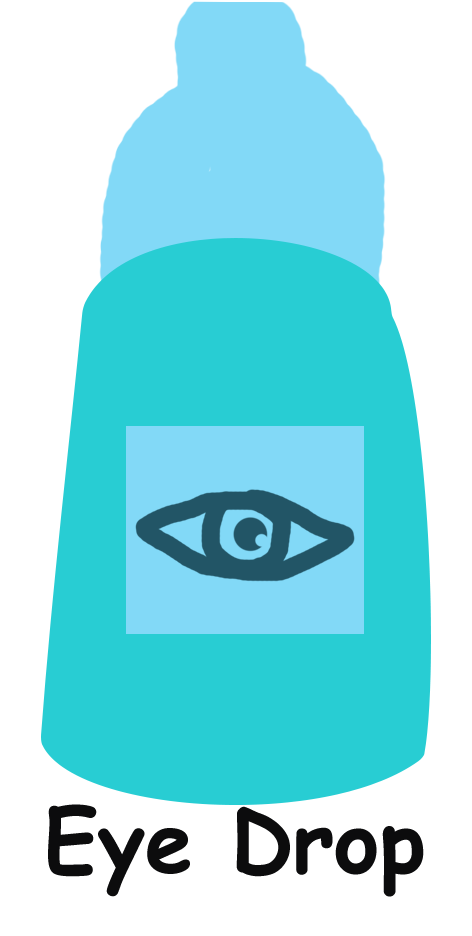
<style>
.page{position:relative;width:472px;height:936px;background:#ffffff}
.page>*{position:absolute;margin:0}
.t1{font:86px "ComicSansMS-Bold";color:#0c0c0d}
</style>
<div class="page">
<p class="t1" style="left:48px;top:804px;width:376px;height:93px">Eye Drop</p>
</div>
